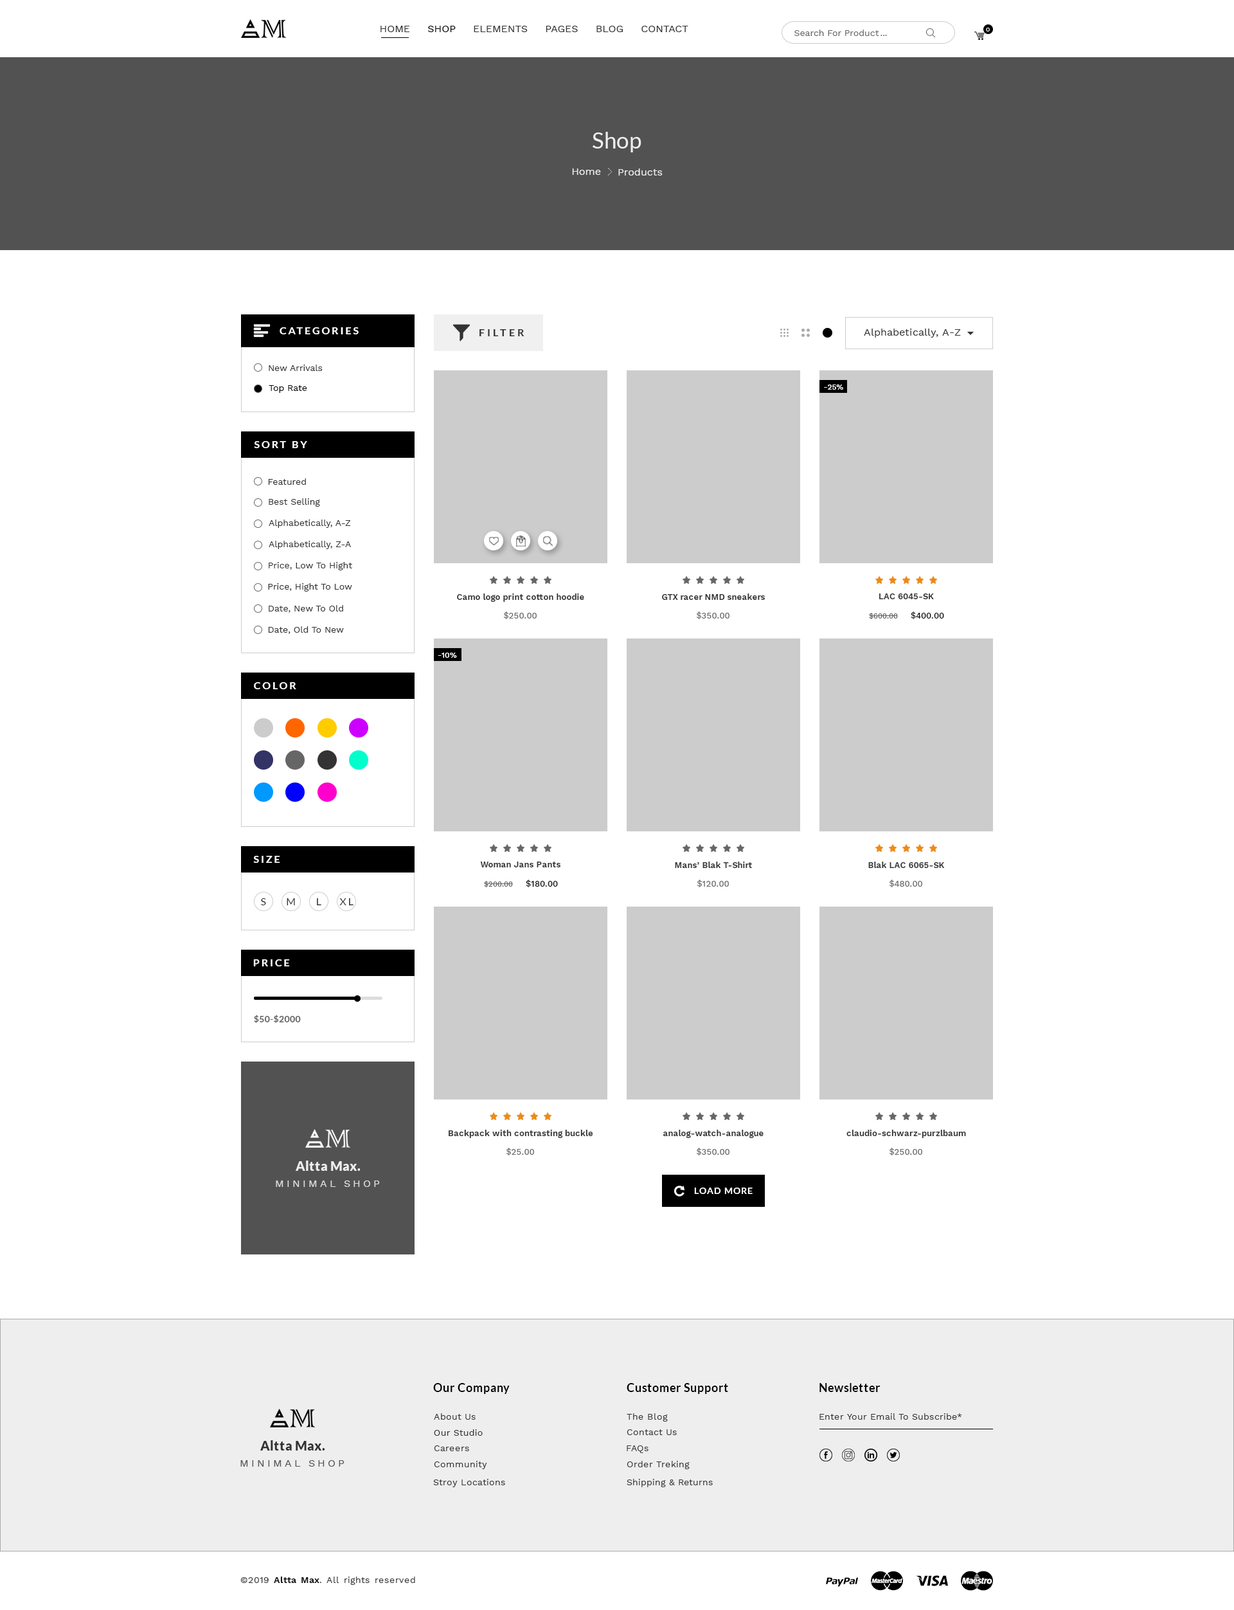
<style>
.page{position:relative;width:1234px;height:1610px;background:#ffffff}
.page>*{position:absolute;margin:0}
.t1{font:10.3px "WorkSans-Regular";color:#333333}
.t2{font:10.3px "WorkSans-Regular";color:#000000}
.t3{font:9px "WorkSans-Regular";color:#666666}
.t4{font:6.4px "WorkSans-Regular";color:#ffffff}
.t5{font:22.5px "Lato-Regular";color:#eeeeee}
.t6{font:10.3px "WorkSans-Regular";color:#eeeeee}
.t7{font:10.3px "Lato-Bold";letter-spacing:0.18em;color:#ffffff}
.t8{font:10.3px "Lato-Bold";letter-spacing:0.25em;color:#333333}
.t9{font:10.3px "WorkSans-Regular";letter-spacing:0.025em;color:#333333}
.t10{font:9px "WorkSans-Regular";color:#333333}
.t11{font:9px "WorkSans-Regular";color:#010101}
.t12{font:7.7px "WorkSans-Medium";letter-spacing:0.01em;color:#ffffff}
.t13{font:8.4px "WorkSans-SemiBold";letter-spacing:0.01em;color:#333333}
.t14{font:8.4px "WorkSans-Medium";letter-spacing:0.01em;color:#666666}
.t15{font:7.1px "WorkSans-Medium";letter-spacing:0.01em;color:#666666}
.t16{font:8.4px "WorkSans-Medium";letter-spacing:0.01em;color:#010101}
.t17{font:8.4px "WorkSans-Medium";letter-spacing:0.01em;color:#000000}
.t18{font:10.3px "Lato-Regular";letter-spacing:0.18em;color:#333333}
.t19{font:9px "Lato-Bold";letter-spacing:0.025em;color:#5f5f5f}
.t20{font:12.9px "Lato-Black";letter-spacing:0.03em;color:#eeeeee}
.t21{font:10.3px "WorkSans-Regular";letter-spacing:0.25em;color:#dddddd}
.t22{font:9px "Lato-Bold";letter-spacing:0.08em;color:#ffffff}
.t23{font:11.6px "Lato-Bold";letter-spacing:0.03em;color:#000000}
.t24{font:9px "WorkSans-Regular";letter-spacing:0.03em;color:#333333}
.t25{font:12.9px "Lato-Black";letter-spacing:0.03em;color:#333333}
.t26{font:10.3px "WorkSans-Regular";letter-spacing:0.25em;color:#555555}
.t27{font:9px "WorkSans-SemiBold";letter-spacing:0.03em;color:#000000}
</style>
<div class="page">
<p class="t1" style="left:381px;top:26px;width:307px;height:6px">HOME     <span class="t2">SHOP</span>     ELEMENTS     PAGES     BLOG     CONTACT</p>
<p class="t3" style="left:795px;top:30px;width:84px;height:6px">Search For Product</p>
<p class="t4" style="left:986px;top:28px;width:4px;height:4px">0</p>
<p class="t3" style="left:881px;top:35px;width:6px;height:1px">...</p>
<p class="t5" style="left:593px;top:132px;width:49px;height:20px">Shop</p>
<p class="t6" style="left:572px;top:168px;width:29px;height:7px">Home</p>
<p class="t6" style="left:618px;top:168px;width:45px;height:8px">Products</p>
<p class="t7" style="left:280px;top:327px;width:79px;height:7px">CATEGORIES</p>
<p class="t8" style="left:480px;top:329px;width:45px;height:7px">FILTER</p>
<p class="t9" style="left:864px;top:328px;width:97px;height:10px">Alphabetically, A-Z</p>
<p class="t10" style="left:269px;top:364px;width:54px;height:7px">New Arrivals</p>
<p class="t11" style="left:269px;top:385px;width:38px;height:8px">Top Rate</p>
<p class="t12" style="left:824px;top:384px;width:19px;height:6px">-25%</p>
<p class="t7" style="left:254px;top:441px;width:53px;height:7px">SORT BY</p>
<p class="t10" style="left:268px;top:478px;width:38px;height:7px">Featured</p>
<p class="t10" style="left:269px;top:498px;width:51px;height:9px">Best Selling</p>
<p class="t10" style="left:269px;top:519px;width:82px;height:9px">Alphabetically, A-Z</p>
<p class="t10" style="left:269px;top:541px;width:82px;height:8px">Alphabetically, Z-A</p>
<p class="t10" style="left:269px;top:562px;width:83px;height:8px">Price, Low To Hight</p>
<p class="t10" style="left:268px;top:583px;width:84px;height:8px">Price, Hight To Low</p>
<p class="t13" style="left:457px;top:593px;width:127px;height:9px">Camo logo print cotton hoodie</p>
<p class="t13" style="left:662px;top:593px;width:103px;height:7px">GTX racer NMD sneakers</p>
<p class="t13" style="left:879px;top:593px;width:55px;height:6px">LAC 6045-SK</p>
<p class="t10" style="left:269px;top:605px;width:74px;height:8px">Date, New To Old</p>
<p class="t14" style="left:504px;top:611px;width:33px;height:8px">$250.00</p>
<p class="t14" style="left:697px;top:611px;width:33px;height:8px">$350.00</p>
<p class="t15" style="left:869px;top:611px;width:75px;height:8px">$600.00     <span class="t16">$400.00</span></p>
<p class="t10" style="left:268px;top:626px;width:76px;height:8px">Date, Old To New</p>
<p class="t12" style="left:438px;top:652px;width:19px;height:6px">-10%</p>
<p class="t7" style="left:254px;top:682px;width:42px;height:7px">COLOR</p>
<p class="t7" style="left:253px;top:856px;width:27px;height:7px">SIZE</p>
<p class="t13" style="left:480px;top:861px;width:81px;height:6px">Woman Jans Pants</p>
<p class="t13" style="left:675px;top:861px;width:77px;height:7px">Mans’ Blak T-Shirt</p>
<p class="t13" style="left:869px;top:861px;width:76px;height:7px">Blak LAC 6065-SK</p>
<p class="t15" style="left:484px;top:879px;width:74px;height:8px">$200.00     <span class="t17">$180.00</span></p>
<p class="t14" style="left:698px;top:879px;width:31px;height:8px">$120.00</p>
<p class="t14" style="left:890px;top:879px;width:33px;height:8px">$480.00</p>
<p class="t18" style="left:261px;top:898px;width:5px;height:7px">S</p>
<p class="t18" style="left:287px;top:898px;width:8px;height:7px">M</p>
<p class="t18" style="left:317px;top:898px;width:4px;height:7px">L</p>
<p class="t18" style="left:339px;top:898px;width:15px;height:7px">XL</p>
<p class="t7" style="left:253px;top:959px;width:37px;height:7px">PRICE</p>
<p class="t19" style="left:254px;top:1014px;width:47px;height:9px">$50-$2000</p>
<p class="t13" style="left:449px;top:1130px;width:144px;height:8px">Backpack with contrasting buckle</p>
<p class="t13" style="left:663px;top:1130px;width:101px;height:8px">analog-watch-analogue</p>
<p class="t13" style="left:847px;top:1130px;width:119px;height:8px">claudio-schwarz-purzlbaum</p>
<p class="t14" style="left:507px;top:1148px;width:27px;height:7px">$25.00</p>
<p class="t14" style="left:697px;top:1148px;width:33px;height:7px">$350.00</p>
<p class="t14" style="left:890px;top:1148px;width:33px;height:7px">$250.00</p>
<p class="t20" style="left:296px;top:1160px;width:65px;height:11px">Altta Max.</p>
<p class="t21" style="left:276px;top:1180px;width:104px;height:7px">MINIMAL SHOP</p>
<p class="t22" style="left:694px;top:1187px;width:59px;height:7px">LOAD MORE</p>
<p class="t23" style="left:433px;top:1383px;width:77px;height:11px">Our Company</p>
<p class="t23" style="left:627px;top:1383px;width:101px;height:11px">Customer Support</p>
<p class="t23" style="left:820px;top:1383px;width:60px;height:9px">Newsletter</p>
<p class="t24" style="left:434px;top:1413px;width:42px;height:6px">About Us</p>
<p class="t24" style="left:627px;top:1413px;width:41px;height:8px">The Blog</p>
<p class="t24" style="left:820px;top:1413px;width:142px;height:6px">Enter Your Email To Subscribe*</p>
<p class="t24" style="left:434px;top:1429px;width:49px;height:7px">Our Studio</p>
<p class="t24" style="left:627px;top:1429px;width:50px;height:6px">Contact Us</p>
<p class="t25" style="left:260px;top:1440px;width:65px;height:10px">Altta Max.</p>
<p class="t24" style="left:434px;top:1445px;width:35px;height:6px">Careers</p>
<p class="t24" style="left:627px;top:1445px;width:22px;height:8px">FAQs</p>
<p class="t26" style="left:240px;top:1460px;width:105px;height:6px">MINIMAL SHOP</p>
<p class="t24" style="left:434px;top:1461px;width:53px;height:8px">Community</p>
<p class="t24" style="left:627px;top:1461px;width:63px;height:8px">Order Treking</p>
<p class="t24" style="left:433px;top:1479px;width:72px;height:8px">Stroy Locations</p>
<p class="t24" style="left:627px;top:1479px;width:86px;height:8px">Shipping &amp; Returns</p>
<p class="t24" style="left:240px;top:1576px;width:175px;height:9px">©2019 <span class="t27">Altta Max</span>. All rights reserved</p>
</div>
